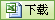
<style>
.page{position:relative;width:55px;height:20px}
.page>*{position:absolute;margin:0}
.t1{font:12px "SimSun";color:#000000}
</style>
<div class="page">
<p class="t1" style="left:25px;top:4px;width:23px;height:11px">下载</p>
</div>
